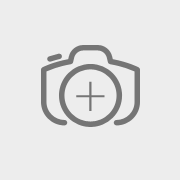
<style>
.page{position:relative;width:180px;height:180px;background:#ededed}
.page>*{position:absolute;margin:0}
.t1{font:64px "Titillium-Thin";color:#757575}
</style>
<div class="page">
<p class="t1" style="left:76px;top:81px;width:29px;height:30px">+</p>
</div>
